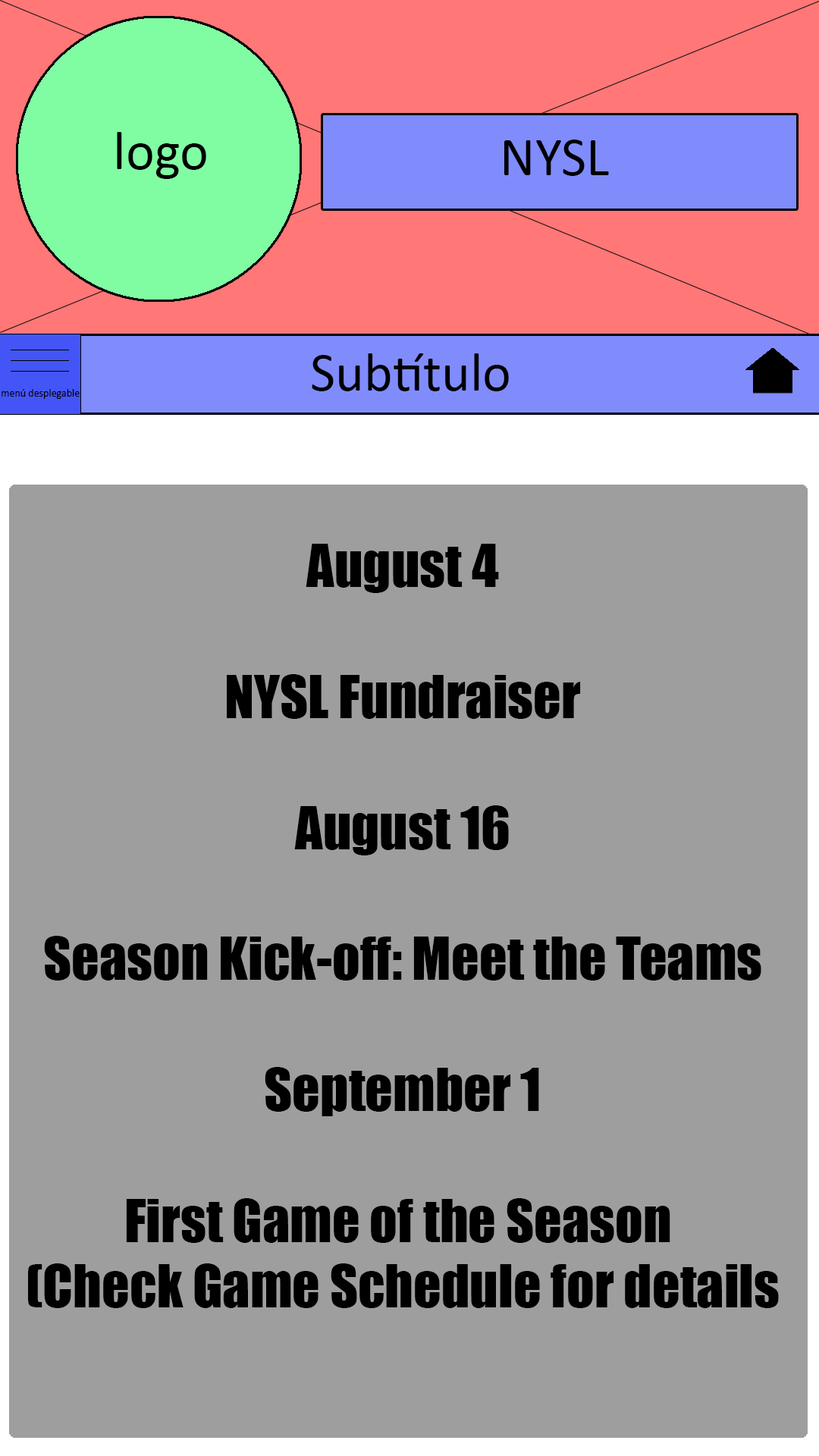
<style>
.page{position:relative;width:819px;height:1456px;background:#9e9e9e}
.page>*{position:absolute;margin:0}
.t1{font:54.6px "Impact";color:#000000}
</style>
<div class="page">
<p class="t1" style="left:28px;top:544px;width:751px;height:764px;text-align:center">August 4<br><br>NYSL Fundraiser<br><br>August 16<br><br>Season Kick-off: Meet the Teams<br><br>September 1<br><br>First Game of the Season <br>(Check Game Schedule for details</p>
</div>
